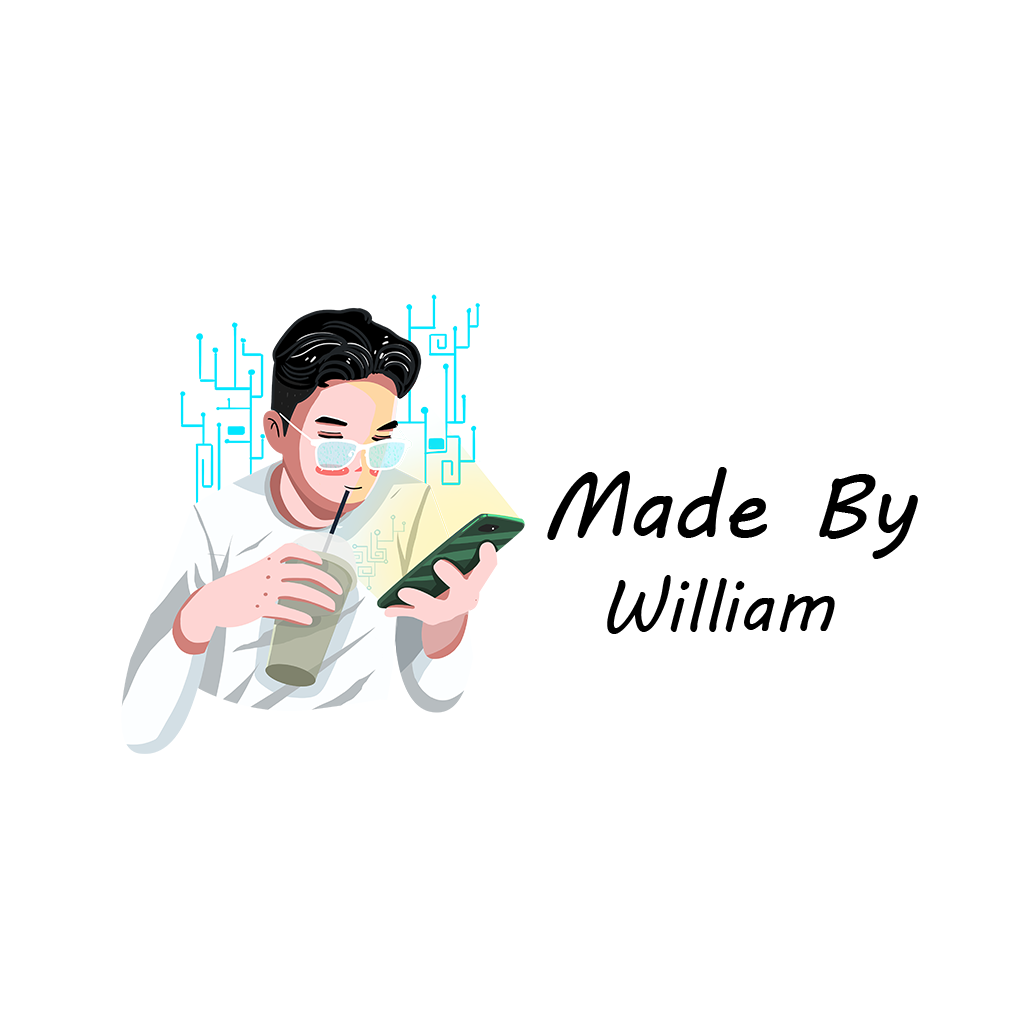
<style>
.page{position:relative;width:1026px;height:1026px;background:#ffffff}
.page>*{position:absolute;margin:0}
.t1{font:92px "MVBoli";color:#000000}
.t2{font:72px "MVBoli";color:#000000}
</style>
<div class="page">
<p class="t1" style="left:547px;top:467px;width:371px;height:92px">Made By</p>
<p class="t2" style="left:607px;top:575px;width:228px;height:59px">William</p>
</div>
